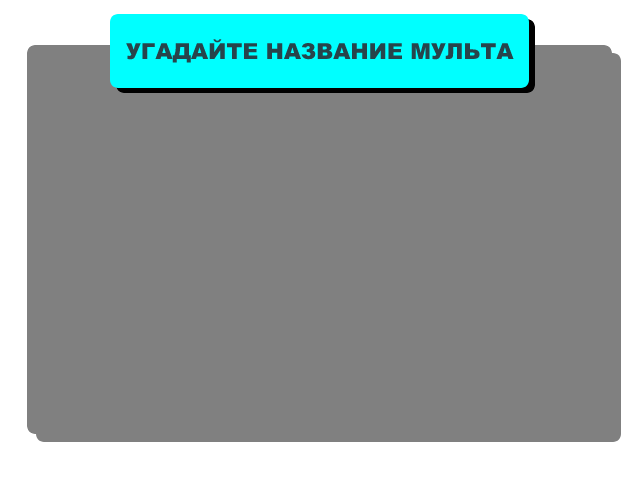
<style>
.page{position:relative;width:640px;height:480px;background:#808080}
.page>*{position:absolute;margin:0}
.t1{font:22px "Arial-Black";color:#27444b}
</style>
<div class="page">
<p class="t1" style="left:126px;top:39px;width:388px;height:24px">УГАДАЙТЕ НАЗВАНИЕ МУЛЬТА</p>
</div>
